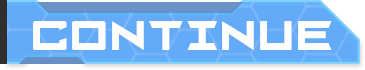
<style>
.page{position:relative;width:365px;height:70px;background:#63aaf9}
.page>*{position:absolute;margin:0}
.t1{font:45.3px "QORE";color:#ffffff}
</style>
<div class="page">
<p class="t1" style="left:33px;top:21px;width:299px;height:29px">CONTINUE</p>
</div>
